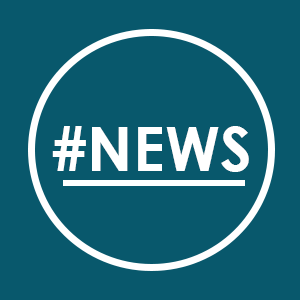
<style>
.page{position:relative;width:300px;height:300px;background:#08586c}
.page>*{position:absolute;margin:0}
.t1{font:60.9px "CenturyGothic-Bold";color:#ffffff}
</style>
<div class="page">
<p class="t1" style="left:52px;top:126px;width:197px;height:46px">#NEWS</p>
</div>
